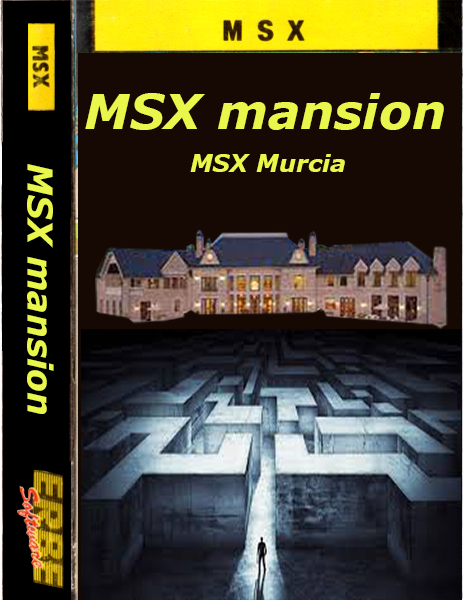
<style>
.page{position:relative;width:463px;height:600px;background:#160903}
.page>*{position:absolute;margin:0}
.t1{font:48px "Verdana-BoldItalic";color:#e9f74c}
.t2{font:24px "Verdana-BoldItalic";color:#e9f74c}
.t3{font:34.3px "Verdana-BoldItalic";color:#e9f74c}
</style>
<div class="page">
<p class="t1" style="left:85px;top:93px;width:359px;height:37px">MSX mansion</p>
<p class="t2" style="left:190px;top:154px;width:155px;height:18px">MSX Murcia</p>
<p class="t3" style="left:27px;top:164px;width:27px;height:250px;rotate:90deg">MSX mansion</p>
</div>
